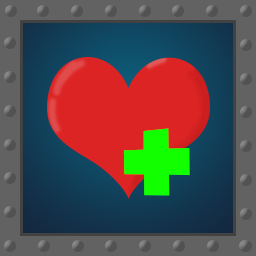
<style>
.page{position:relative;width:256px;height:256px;background:#626262}
.page>*{position:absolute;margin:0}
.t1{font:162.5px "LuckiestGuy-Regular";color:#12ff00}
</style>
<div class="page">
<p class="t1" style="left:123px;top:128px;width:67px;height:68px">+</p>
</div>
